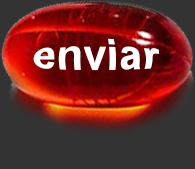
<style>
.page{position:relative;width:195px;height:169px;background:#333333}
.page>*{position:absolute;margin:0}
.t1{font:35.1px "Arial-BoldMT";color:#ffffff}
</style>
<div class="page">
<p class="t1" style="left:33px;top:38px;width:127px;height:33px">enviar</p>
</div>
